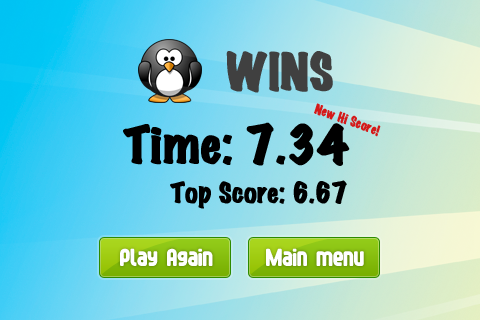
<style>
.page{position:relative;width:480px;height:320px}
.page>*{position:absolute;margin:0}
.t1{font:45.8px "MarkerFelt-Wide";color:#404040;font-weight:bold}
.t2{font:12.5px "MarkerFelt-Wide";color:#d51919;font-weight:bold;scale:0.91 1}
.t3{font:45.8px "MarkerFelt-Wide";color:#000000;font-weight:bold}
.t4{font:25px "MarkerFelt-Wide";color:#000000;font-weight:bold}
.t5{font:22px "FontopoFONTOPO";color:#ffffff}
</style>
<div class="page">
<p class="t1" style="left:226px;top:51px;width:107px;height:42px">WINS</p>
<p class="t2" style="left:314px;top:103px;width:67px;height:34px;rotate:20deg">New Hi Score!</p>
<p class="t3" style="left:123px;top:122px;width:227px;height:44px">Time: 7.34</p>
<p class="t4" style="left:170px;top:180px;width:177px;height:29px">Top Score: 6.67</p>
<p class="t5" style="left:120px;top:248px;width:93px;height:18px">Play Again</p>
<p class="t5" style="left:266px;top:248px;width:98px;height:18px">Main menu</p>
</div>
